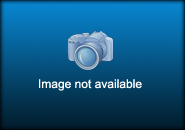
<style>
.page{position:relative;width:185px;height:130px}
.page>*{position:absolute;margin:0}
.t1{font:12px "ArialMT";color:#ffffff}
</style>
<div class="page">
<p class="t1" style="left:39px;top:79px;width:103px;height:12px">Image not available</p>
</div>
